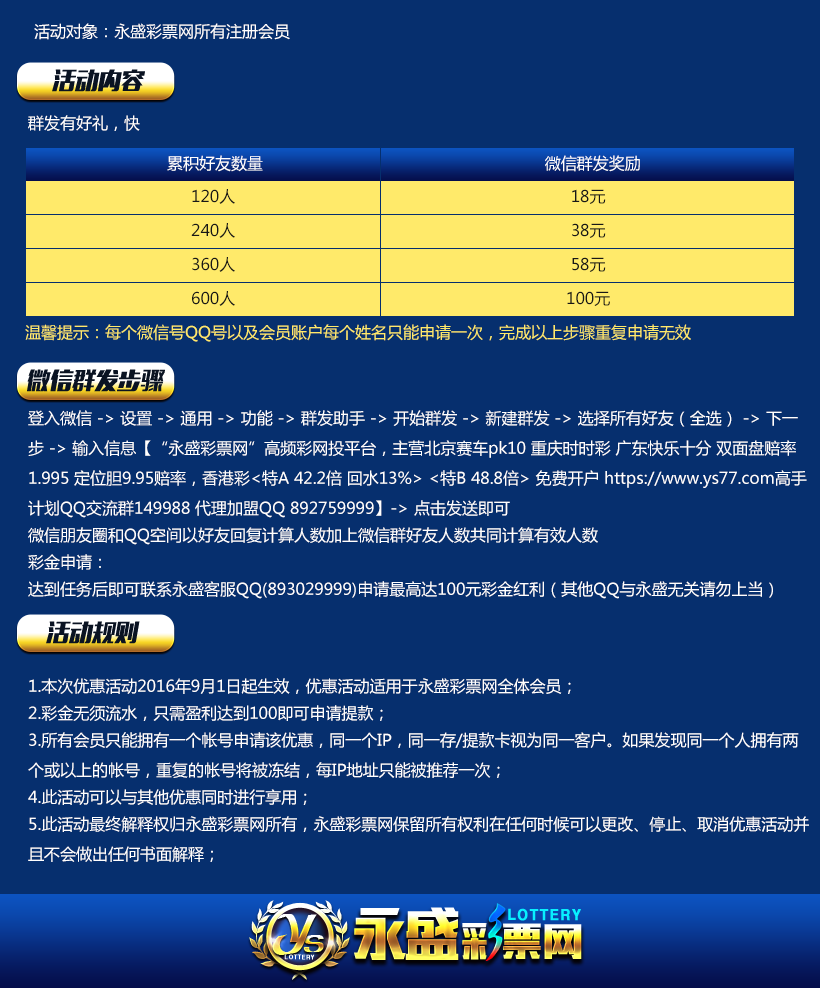
<style>
.page{position:relative;width:820px;height:988px;background:#062f6e}
.page>*{position:absolute;margin:0}
.t1{font:16px "MicrosoftYaHei";color:#ffffff}
.t2{font:23.1px "MFLiHei_Noncommercial-Regular";color:#0a1322;text-transform:uppercase;font-style:italic}
.t3{font:16px "MicrosoftYaHei";color:#ffffff;text-transform:uppercase}
.t4{font:16px "MicrosoftYaHei";color:#171717;text-transform:uppercase}
.t5{font:16px "MicrosoftYaHei";color:#ffea6a}
.t6{font:16px/30px "MicrosoftYaHei";color:#ffffff}
</style>
<div class="page">
<p class="t1" style="left:34px;top:23px;width:256px;height:17px">活动对象：永盛彩票网所有注册会员</p>
<p class="t2" style="left:52px;top:69px;width:93px;height:23px">活动内容</p>
<p class="t1" style="left:28px;top:115px;width:112px;height:16px">群发有好礼，快</p>
<p class="t3" style="left:167px;top:155px;width:473px;height:17px">累积好友数量                                                          微信群发奖励</p>
<p class="t4" style="left:192px;top:189px;width:414px;height:15px">120人                                                                  18元</p>
<p class="t4" style="left:191px;top:223px;width:415px;height:15px">240人                                                                  38元</p>
<p class="t4" style="left:192px;top:257px;width:414px;height:15px">360人                                                                  58元</p>
<p class="t4" style="left:192px;top:291px;width:418px;height:15px">600人                                                                 100元</p>
<p class="t5" style="left:25px;top:324px;width:666px;height:18px">温馨提示：每个微信号QQ号以及会员账户每个姓名只能申请一次，完成以上步骤重复申请无效</p>
<p class="t2" style="left:27px;top:369px;width:138px;height:23px">微信群发步骤</p>
<p class="t6" style="left:28px;top:410px;width:779px;height:189px">登入微信 -&gt; 设置 -&gt; 通用 -&gt; 功能 -&gt; 群发助手 -&gt; 开始群发 -&gt; 新建群发 -&gt; 选择所有好友（全选） -&gt; 下一步 -&gt; 输入信息【“永盛彩票网”高频彩网投平台，主营北京赛车pk10 重庆时时彩 广东快乐十分 双面盘赔率1.995 定位胆9.95赔率，香港彩&lt;特A 42.2倍 回水13%&gt; &lt;特B 48.8倍&gt; 免费开户 https://www.ys77.com高手计划QQ交流群149988 代理加盟QQ 892759999】-&gt; 点击发送即可<br>微信朋友圈和QQ空间以好友回复计算人数加上微信群好友人数共同计算有效人数<br>彩金申请：<br>达到任务后即可联系永盛客服QQ(893029999)申请最高达100元彩金红利（其他QQ与永盛无关请勿上当）</p>
<p class="t2" style="left:46px;top:621px;width:94px;height:23px">活动规则</p>
<p class="t6" style="left:28px;top:678px;width:781px;height:184px">1.本次优惠活动2016年9月1日起生效，优惠活动适用于永盛彩票网全体会员；<br>2.彩金无须流水，只需盈利达到100即可申请提款；<br>3.所有会员只能拥有一个帐号申请该优惠，同一个IP，同一存/提款卡视为同一客户。如果发现同一个人拥有两个或以上的帐号，重复的帐号将被冻结，每IP地址只能被推荐一次；<br>4.此活动可以与其他优惠同时进行享用；<br>5.此活动最终解释权归永盛彩票网所有，永盛彩票网保留所有权利在任何时候可以更改、停止、取消优惠活动并且不会做出任何书面解释；</p>
</div>
